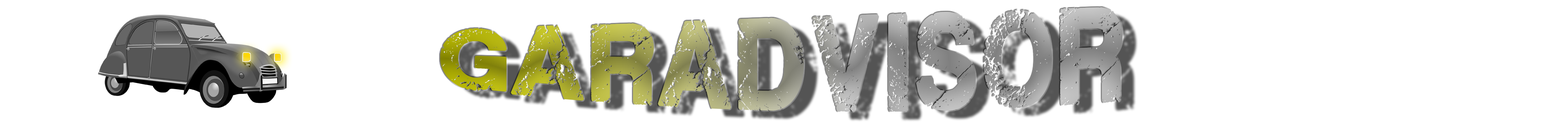
<style>
.page{position:relative;width:1568px;height:122px;background:#ffffff}
.page>*{position:absolute;margin:0}
.t1{font:86.8px "PlaneCrash"}
</style>
<div class="page">
<p class="t1" style="left:440px;top:7px;width:683px;height:105px">garadvisor</p>
</div>
